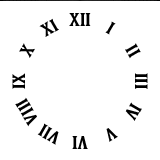
<style>
.page{position:relative;width:160px;height:160px;background:#ffffff}
.page>*{position:absolute;margin:0}
.t1{font:18px "Kirsty";color:#000000}
.t2{font:18px "Kirsty"}
</style>
<div class="page">
<p class="t1" style="left:39px;top:17px;width:20px;height:19px;rotate:-30deg">XI</p>
<p class="t1" style="left:69px;top:12px;width:22px;height:13px">XII</p>
<p class="t1" style="left:105px;top:20px;width:11px;height:14px;rotate:30deg">I</p>
<p class="t2" style="left:19px;top:42px;width:16px;height:15px;rotate:-60deg">X</p>
<p class="t2" style="left:125px;top:42px;width:16px;height:16px;rotate:60deg">II</p>
<p class="t2" style="left:12px;top:72px;width:13px;height:16px;rotate:-90deg">IX</p>
<p class="t2" style="left:15px;top:96px;width:22px;height:30px;rotate:-120deg">VIII</p>
<p class="t2" style="left:125px;top:101px;width:17px;height:19px;rotate:120deg">IV</p>
<p class="t1" style="left:37px;top:122px;width:22px;height:22px;rotate:-150deg">VII</p>
<p class="t1" style="left:72px;top:135px;width:16px;height:13px;rotate:180deg">VI</p>
<p class="t1" style="left:106px;top:127px;width:12px;height:14px;rotate:150deg">V</p>
</div>
